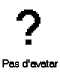
<style>
.page{position:relative;width:60px;height:80px;background:#ffffff}
.page>*{position:absolute;margin:0}
.t1{font:48px "MS Sans Serif";color:#000000;font-weight:bold}
.t2{font:10px "MS Sans Serif";color:#000000;font-weight:bold}
</style>
<div class="page">
<p class="t1" style="left:16px;top:9px;width:25px;height:36px">?</p>
<p class="t2" style="left:2px;top:59px;width:56px;height:9px">Pas d’avatar</p>
</div>
